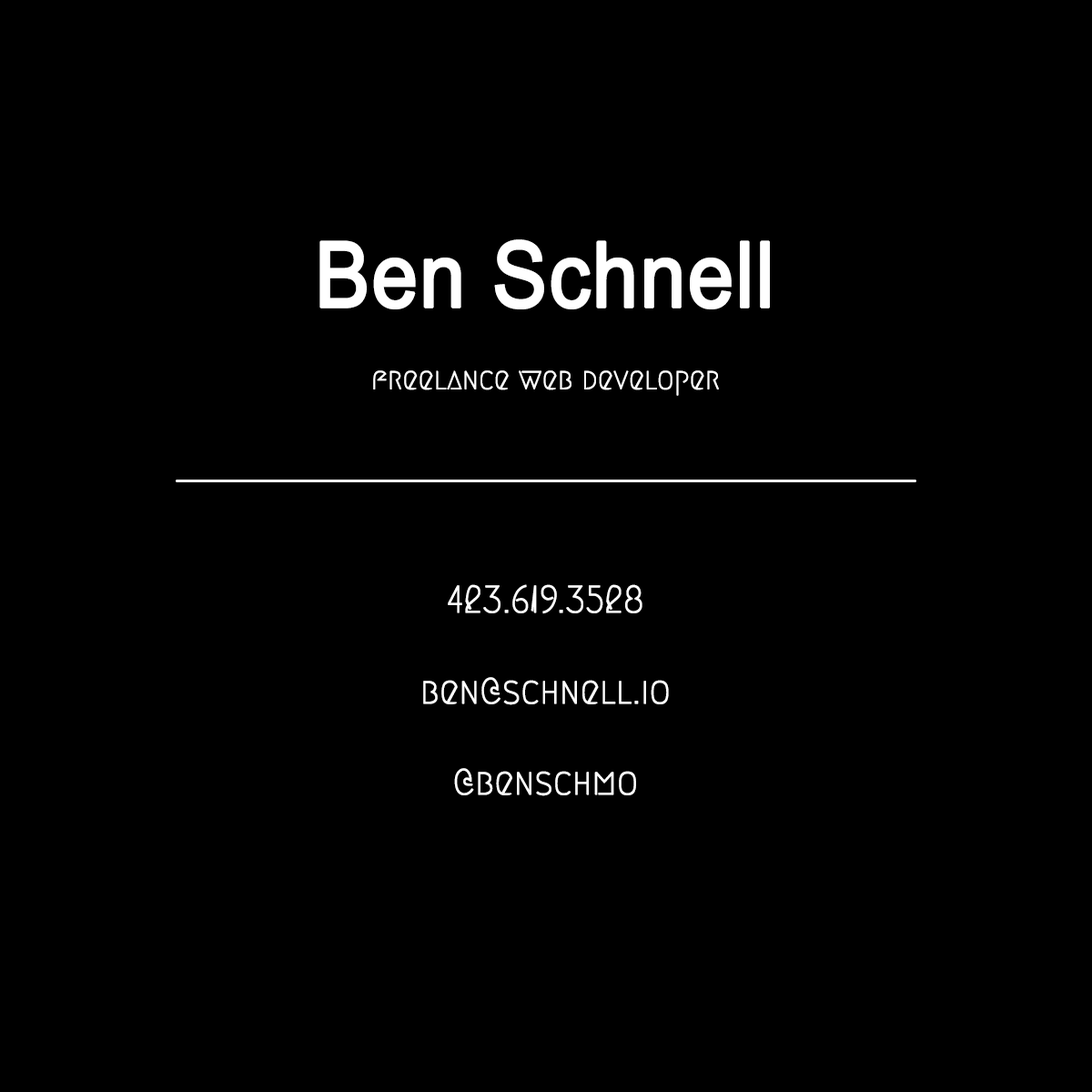
<style>
.page{position:relative;width:1092px;height:1092px;background:#000000}
.page>*{position:absolute;margin:0}
.t1{font:30.3px "Megrim";color:#ffffff;font-weight:bold;scale:0.9 1}
.t2{font:91px "ArialMT";color:#ffffff;font-weight:bold;scale:0.9 1}
.t3{font:37.9px "Megrim";color:#ffffff;font-weight:bold;scale:0.9 1}
</style>
<div class="page">
<p class="t1" style="left:319px;top:239px;width:451px;height:157px;text-align:center"><span class="t2">Ben Schnell<br><br></span>freelance web developer</p>
<p class="t3" style="left:423px;top:584px;width:246px;height:212px;text-align:center">423.619.3528<br><br>ben@schnell.io<br><br>@benschmo</p>
</div>
